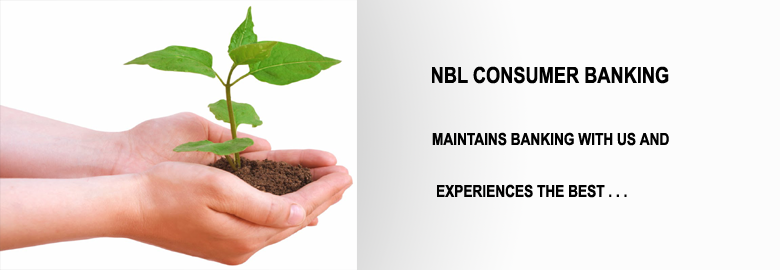
<style>
.page{position:relative;width:780px;height:270px;background:#fcfcfc}
.page>*{position:absolute;margin:0}
.t1{font:22.2px "ArialNarrow-Bold";color:#000000;text-transform:uppercase}
.t2{font:16.7px "ArialNarrow-Bold";color:#010101;text-transform:uppercase}
</style>
<div class="page">
<p class="t1" style="left:432px;top:66px;width:237px;height:18px">nbl consumer banKing</p>
<p class="t2" style="left:432px;top:132px;width:237px;height:14px">Maintains banking with us and</p>
<p class="t2" style="left:437px;top:184px;width:190px;height:14px">experiences the best . . .</p>
</div>
